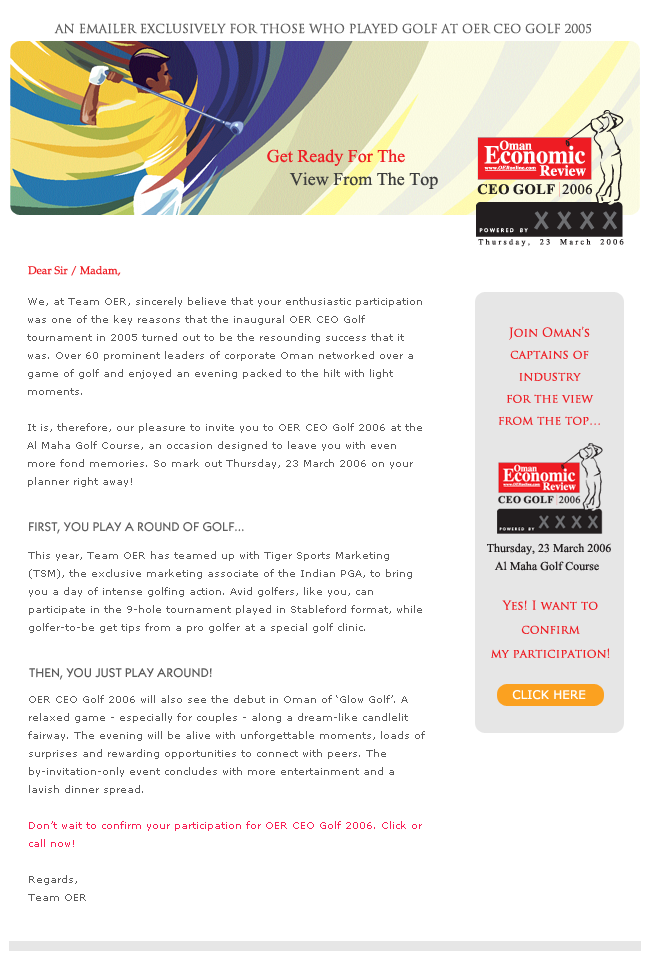
<style>
.page{position:relative;width:650px;height:954px;background:#ffffff}
.page>*{position:absolute;margin:0}
.t1{font:12px "TrajanPro-Regular";color:#5f5f5f}
.t2{font:18px "TimesNewRomanPSMT";color:#ee1c23}
.t3{font:18px "TimesNewRomanPSMT";color:#3d3d3d}
.t4{font:11px "Palatino-Roman";color:#ee1c23}
.t5{font:10px/18px "Verdana";color:#5a5a5a}
.t6{font:12px/22px "TrajanPro-Regular";color:#ee1c23}
.t7{font:13px "KabelItcTEE-Medi";color:#5f5f5f}
.t8{font:12px "TimesNewRomanPSMT";color:#221e1f}
.t9{font:10px/18px "Verdana";color:#f82056}
.t10{font:12px/24px "TrajanPro-Regular";color:#ee1c23}
.t11{font:13px "KabelItcTEE-Medi";color:#5a5a5a}
.t12{font:12px "Verdana";color:#ffffff}
</style>
<div class="page">
<p class="t1" style="left:54px;top:23px;width:538px;height:11px">AN EMAILER EXCLUSIVELY FOR THOSE WHO PLAYED GOLF AT OER CEO GOLF 2005</p>
<p class="t2" style="left:267px;top:149px;width:138px;height:17px">Get Ready For The</p>
<p class="t3" style="left:289px;top:172px;width:149px;height:17px">View From The Top</p>
<p class="t4" style="left:28px;top:266px;width:93px;height:10px">Dear Sir / Madam,</p>
<p class="t5" style="left:27px;top:297px;width:395px;height:190px">We, at Team OER, sincerely believe that your enthusiastic participation was one of the key reasons that the inaugural OER CEO Golf tournament in 2005 turned out to be the resounding success that it was. Over 60 prominent leaders of corporate Oman networked over a game of golf and enjoyed an evening packed to the hilt with light moments.<br><br>It is, therefore, our pleasure to invite you to OER CEO Golf 2006 at the Al Maha Golf Course, an occasion designed to leave you with even more fond memories. So mark out Thursday, 23 March 2006 on your planner right away!</p>
<p class="t6" style="left:498px;top:326px;width:102px;height:99px;text-align:center">Join Oman’s captains of industry<br>for the view from the top…</p>
<p class="t7" style="left:29px;top:522px;width:215px;height:12px">FIRST, YOU PLAY A ROUND OF GOLF…</p>
<p class="t8" style="left:487px;top:543px;width:124px;height:12px">Thursday, 23 March 2006</p>
<p class="t5" style="left:28px;top:551px;width:397px;height:350px">This year, Team OER has teamed up with Tiger Sports Marketing (TSM), the exclusive marketing associate of the Indian PGA, to bring you a day of intense golfing action. Avid golfers, like you, can participate in the 9-hole tournament played in Stableford format, while golfer-to-be get tips from a pro golfer at a special golf clinic.<br><br><br><br>OER CEO Golf 2006 will also see the debut in Oman of ‘Glow Golf’. A relaxed game - especially for couples - along a dream-like candlelit fairway. The evening will be alive with unforgettable moments, loads of surprises and rewarding opportunities to connect with peers. The by-invitation-only event concludes with more entertainment and a lavish dinner spread.<br><br><span class="t9">Don’t wait to confirm your participation for OER CEO Golf 2006. Click or call now!<br><br></span>Regards,<br>Team OER</p>
<p class="t8" style="left:494px;top:561px;width:105px;height:10px">Al Maha Golf Course</p>
<p class="t10" style="left:491px;top:600px;width:119px;height:58px;text-align:center">Yes! I want to confirm<br>my participation!</p>
<p class="t11" style="left:29px;top:668px;width:183px;height:12px">THEN, YOU JUST PLAY AROUND!</p>
<p class="t12" style="left:512px;top:690px;width:74px;height:10px">CLICK HERE</p>
</div>
